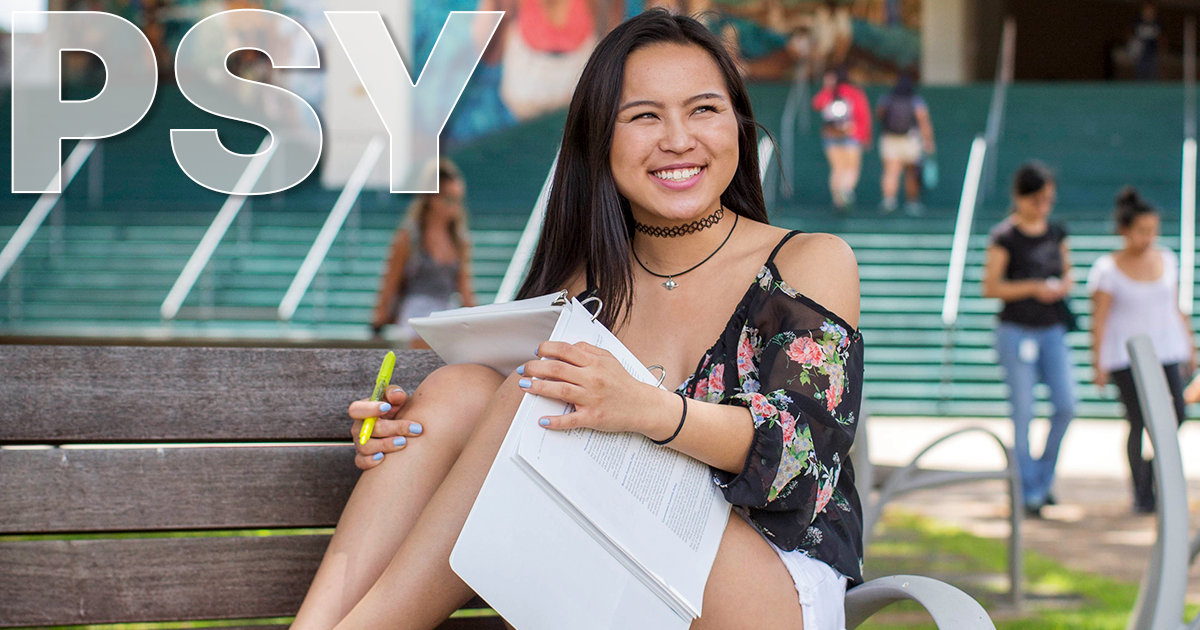
<style>
.page{position:relative;width:1200px;height:630px}
.page>*{position:absolute;margin:0}
.t1{font:250px "Inter-Black"}
</style>
<div class="page">
<p class="t1" style="left:11px;top:8px;width:495px;height:188px">PSY</p>
</div>
